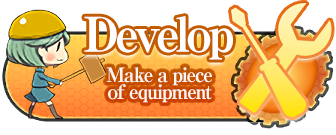
<style>
.page{position:relative;width:336px;height:135px;background:#ffffff}
.page>*{position:absolute;margin:0}
.t1{font:48px "RyuminPro-ExBold";letter-spacing:-0.08em;color:#ffffff}
.t2{font:20px/17px "RyuminPro-ExBold";letter-spacing:-0.08em;color:#fff6f1}
</style>
<div class="page">
<p class="t1" style="left:84px;top:16px;width:149px;height:44px">Develop</p>
<p class="t2" style="left:106px;top:67px;width:106px;height:36px;text-align:center">Make a piece<br>of equipment</p>
</div>
